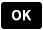
<style>
.page{position:relative;width:43px;height:30px;background:#000000}
.page>*{position:absolute;margin:0}
.t1{font:15px "SourceSansPro-Regular";color:#fefefe;text-transform:uppercase;font-weight:bold}
</style>
<div class="page">
<p class="t1" style="left:12px;top:10px;width:19px;height:11px">ok</p>
</div>
